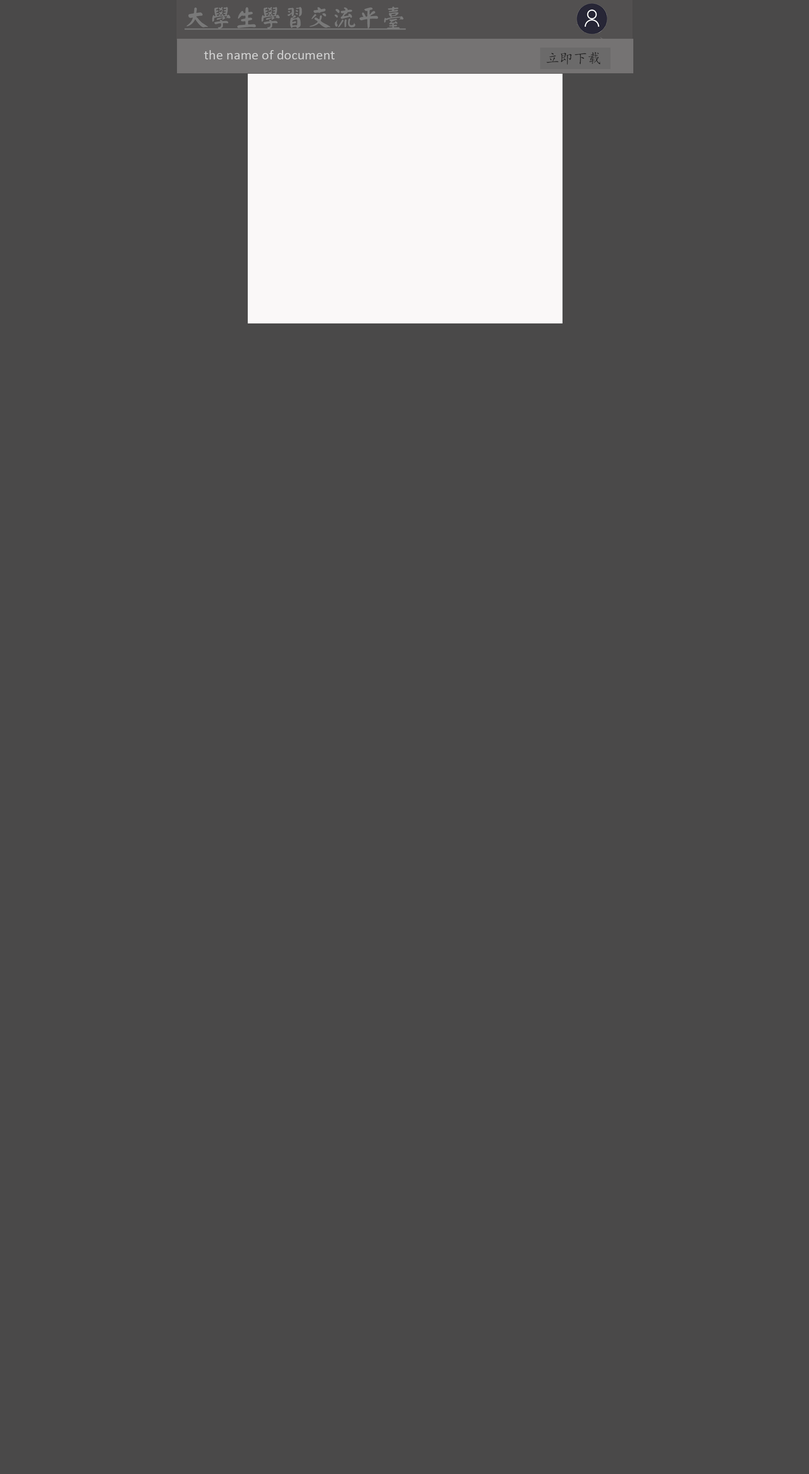
<style>
.page{position:relative;width:809px;height:1474px;background:#4a4949}
.page>*{position:absolute;margin:0}
.t1{font:24.6px "HanWangYanKai";color:#797979;text-decoration:underline}
.t2{font:14px "Calibri";color:#d1d1d1}
.t3{font:14px "KaiTi";color:#222222}
</style>
<div class="page">
<p class="t1" style="left:185px;top:6px;width:221px;height:24px">大學生學習交流平臺</p>
<p class="t2" style="left:204px;top:50px;width:130px;height:9px">the name of document</p>
<p class="t3" style="left:546px;top:52px;width:54px;height:13px">立即下载</p>
</div>
